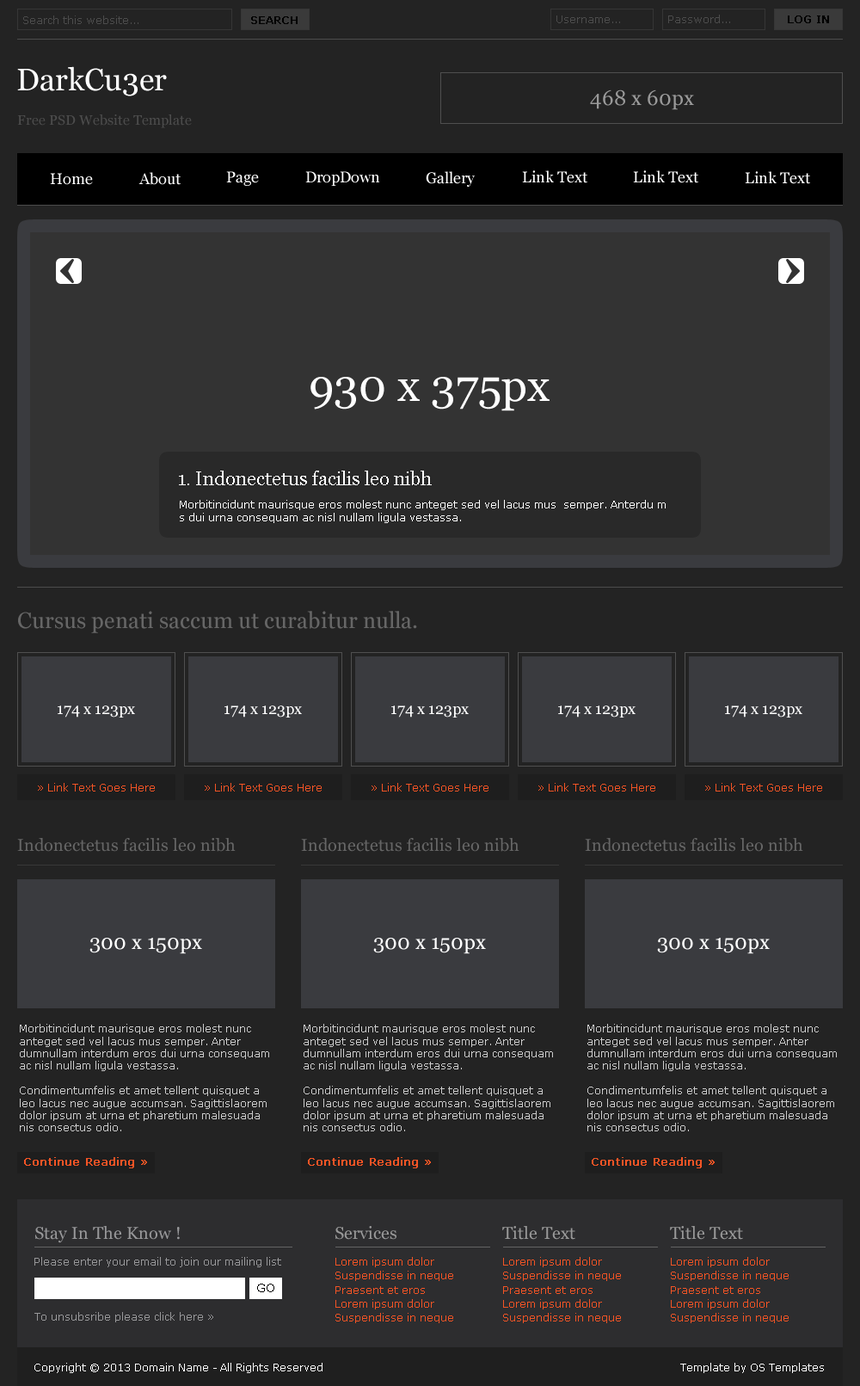
<style>
.page{position:relative;width:860px;height:1386px;background:#232323}
.page>*{position:absolute;margin:0}
.t1{font:10.3px "Verdana";color:#4c4c4c}
.t2{font:10.3px "Verdana";color:#000000;font-weight:bold}
.t3{font:31px "Georgia";color:#ffffff}
.t4{font:20.6px "Georgia";color:#999999}
.t5{font:13.8px "Georgia";color:#4c4c4c}
.t6{font:15.5px "Georgia";color:#ffffff}
.t7{font:44.7px "Georgia";color:#ffffff}
.t8{font:18.9px "Georgia";color:#ffffff}
.t9{font:10.3px/12.4px "Verdana";color:#ffffff}
.t10{font:22.4px "Georgia";color:#666666}
.t11{font:10.3px "Verdana";color:#f35425}
.t12{font:17.2px "Georgia";color:#666666}
.t13{font:20.6px "Georgia";color:#ffffff}
.t14{font:10.3px/12.4px "Verdana";color:#cccccc}
.t15{font:11.2px "Verdana";color:#f35425;font-weight:bold}
.t16{font:17.2px "Georgia";color:#98989a}
.t17{font:17.2px "Georgia";color:#999999}
.t18{font:10.3px "Verdana";color:#98989a}
.t19{font:10.3px/14px "Verdana";color:#f35425}
.t20{font:12px "Verdana";color:#000000}
.t21{font:10.3px "Verdana";color:#ffffff}
</style>
<div class="page">
<p class="t1" style="left:23px;top:15px;width:116px;height:9px">Search this website...</p>
<p class="t2" style="left:251px;top:16px;width:47px;height:8px">SEARCH</p>
<p class="t1" style="left:557px;top:15px;width:63px;height:8px">Username...</p>
<p class="t1" style="left:668px;top:15px;width:62px;height:8px">Password...</p>
<p class="t2" style="left:788px;top:15px;width:41px;height:8px">LOG IN</p>
<p class="t3" style="left:17px;top:66px;width:150px;height:30px">DarkCu3er</p>
<p class="t4" style="left:590px;top:89px;width:104px;height:21px">468 x 60px</p>
<p class="t5" style="left:17px;top:114px;width:175px;height:14px">Free PSD Website Template</p>
<p class="t6" style="left:50px;top:173px;width:43px;height:12px">Home</p>
<p class="t6" style="left:139px;top:172px;width:42px;height:13px">About</p>
<p class="t6" style="left:226px;top:171px;width:33px;height:15px">Page</p>
<p class="t6" style="left:305px;top:171px;width:75px;height:15px">DropDown</p>
<p class="t6" style="left:426px;top:171px;width:49px;height:16px">Gallery</p>
<p class="t6" style="left:522px;top:170px;width:66px;height:13px">Link Text</p>
<p class="t6" style="left:633px;top:170px;width:66px;height:13px">Link Text</p>
<p class="t6" style="left:745px;top:171px;width:65px;height:13px">Link Text</p>
<p class="t7" style="left:311px;top:377px;width:239px;height:34px">930 x 375px</p>
<p class="t8" style="left:179px;top:471px;width:253px;height:14px">1. Indonectetus facilis leo nibh</p>
<p class="t9" style="left:180px;top:500px;width:486px;height:23px">Morbitincidunt maurisque eros molest nunc anteget sed vel lacus mus  semper. Anterdu m<br>s dui urna consequam ac nisl nullam ligula vestassa.</p>
<p class="t10" style="left:18px;top:611px;width:399px;height:22px">Cursus penati saccum ut curabitur nulla.</p>
<p class="t6" style="left:58px;top:705px;width:77px;height:13px">174 x 123px</p>
<p class="t6" style="left:225px;top:705px;width:77px;height:13px">174 x 123px</p>
<p class="t6" style="left:391px;top:705px;width:78px;height:13px">174 x 123px</p>
<p class="t6" style="left:558px;top:705px;width:78px;height:13px">174 x 123px</p>
<p class="t6" style="left:725px;top:705px;width:78px;height:13px">174 x 123px</p>
<p class="t11" style="left:38px;top:783px;width:117px;height:9px">» Link Text Goes Here</p>
<p class="t11" style="left:205px;top:783px;width:117px;height:9px">» Link Text Goes Here</p>
<p class="t11" style="left:372px;top:783px;width:117px;height:9px">» Link Text Goes Here</p>
<p class="t11" style="left:539px;top:783px;width:117px;height:9px">» Link Text Goes Here</p>
<p class="t11" style="left:705px;top:783px;width:117px;height:9px">» Link Text Goes Here</p>
<p class="t12" style="left:17px;top:838px;width:219px;height:14px">Indonectetus facilis leo nibh</p>
<p class="t12" style="left:301px;top:838px;width:219px;height:14px">Indonectetus facilis leo nibh</p>
<p class="t12" style="left:585px;top:838px;width:219px;height:14px">Indonectetus facilis leo nibh</p>
<p class="t13" style="left:89px;top:938px;width:113px;height:16px">300 x 150px</p>
<p class="t13" style="left:373px;top:938px;width:113px;height:16px">300 x 150px</p>
<p class="t13" style="left:657px;top:938px;width:113px;height:16px">300 x 150px</p>
<p class="t14" style="left:20px;top:1024px;width:249px;height:107px">Morbitincidunt maurisque eros molest nunc anteget sed vel lacus mus semper. Anter dumnullam interdum eros dui urna consequam ac nisl nullam ligula vestassa. <br><br>Condimentumfelis et amet tellent quisquet a leo lacus nec augue accumsan. Sagittislaorem dolor ipsum at urna et pharetium malesuada nis consectus odio.</p>
<p class="t14" style="left:304px;top:1024px;width:249px;height:107px">Morbitincidunt maurisque eros molest nunc anteget sed vel lacus mus semper. Anter dumnullam interdum eros dui urna consequam ac nisl nullam ligula vestassa. <br><br>Condimentumfelis et amet tellent quisquet a leo lacus nec augue accumsan. Sagittislaorem dolor ipsum at urna et pharetium malesuada nis consectus odio.</p>
<p class="t14" style="left:588px;top:1024px;width:249px;height:107px">Morbitincidunt maurisque eros molest nunc anteget sed vel lacus mus semper. Anter dumnullam interdum eros dui urna consequam ac nisl nullam ligula vestassa. <br><br>Condimentumfelis et amet tellent quisquet a leo lacus nec augue accumsan. Sagittislaorem dolor ipsum at urna et pharetium malesuada nis consectus odio.</p>
<p class="t15" style="left:24px;top:1157px;width:123px;height:11px">Continue Reading »</p>
<p class="t15" style="left:308px;top:1157px;width:123px;height:11px">Continue Reading »</p>
<p class="t15" style="left:592px;top:1157px;width:123px;height:11px">Continue Reading »</p>
<p class="t16" style="left:35px;top:1226px;width:145px;height:17px">Stay In The Know !</p>
<p class="t17" style="left:336px;top:1226px;width:61px;height:14px">Services</p>
<p class="t17" style="left:502px;top:1226px;width:74px;height:14px">Title Text</p>
<p class="t17" style="left:670px;top:1226px;width:73px;height:14px">Title Text</p>
<p class="t18" style="left:34px;top:1257px;width:247px;height:10px">Please enter your email to join our mailing list</p>
<p class="t19" style="left:336px;top:1257px;width:117px;height:66px">Lorem ipsum dolor<br>Suspendisse in neque<br>Praesent et eros<br>Lorem ipsum dolor<br>Suspendisse in neque</p>
<p class="t19" style="left:503px;top:1257px;width:118px;height:66px">Lorem ipsum dolor<br>Suspendisse in neque<br>Praesent et eros<br>Lorem ipsum dolor<br>Suspendisse in neque</p>
<p class="t19" style="left:671px;top:1257px;width:118px;height:66px">Lorem ipsum dolor<br>Suspendisse in neque<br>Praesent et eros<br>Lorem ipsum dolor<br>Suspendisse in neque</p>
<p class="t20" style="left:257px;top:1284px;width:17px;height:8px">GO</p>
<p class="t18" style="left:34px;top:1312px;width:179px;height:10px">To unsubsribe please click here »</p>
<p class="t21" style="left:34px;top:1363px;width:289px;height:10px">Copyright © 2013 Domain Name - All Rights Reserved</p>
<p class="t21" style="left:681px;top:1363px;width:143px;height:10px">Template by OS Templates</p>
</div>
